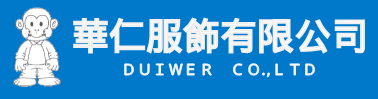
<style>
.page{position:relative;width:378px;height:99px;background:#0179ca}
.page>*{position:absolute;margin:0}
.t1{font:37px "DroidSansFallback";color:#ffffff}
.t2{font:15.5px "DroidSansFallback";color:#ffffff}
.t3{font:15.5px "DejaVuSans";color:#ffffff}
</style>
<div class="page">
<p class="t1" style="left:72px;top:16px;width:294px;height:39px">華仁服飾有限公司</p>
<p class="t2" style="left:123px;top:62px;width:193px;height:16px">ＤＵＩＷＥＲ    ＣＯ<span class="t3">.,</span>ＬＴＤ</p>
</div>
